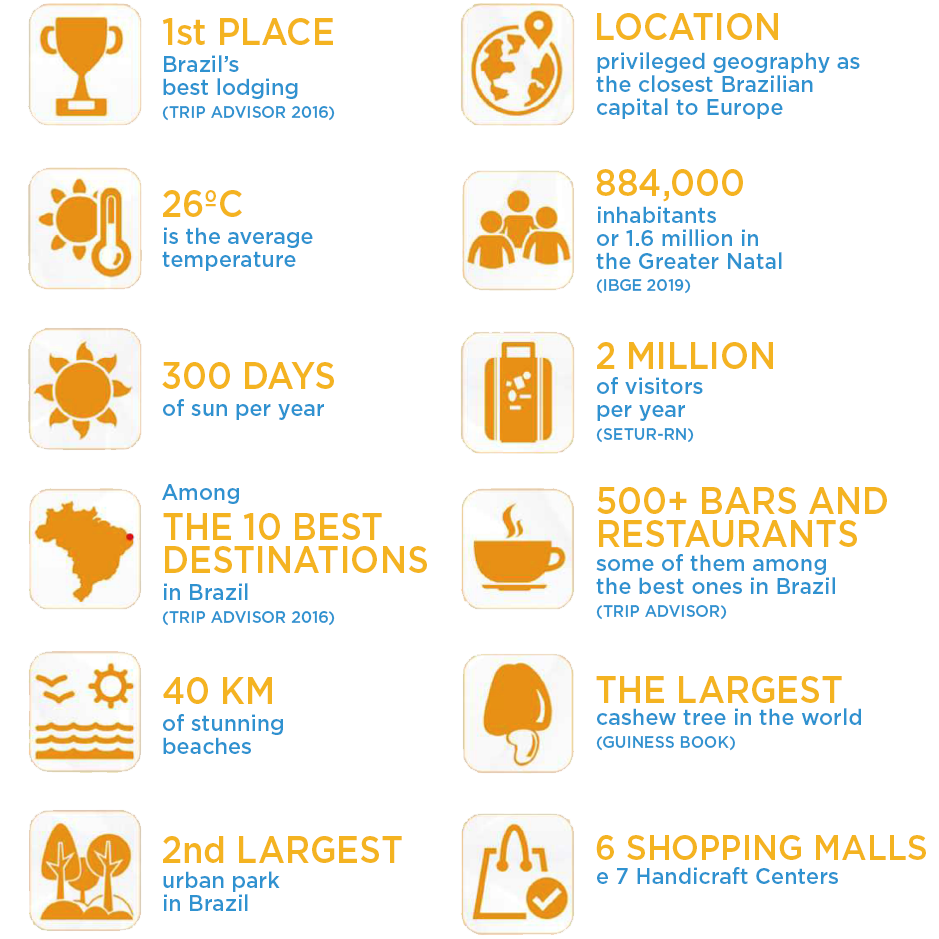
<style>
.page{position:relative;width:939px;height:939px;background:#ffffff}
.page>*{position:absolute;margin:0}
.t1{font:37.2px "Gotham-Medium";color:#f4b321;scale:0.92 1}
.t2{font:22.8px/22.8px "Gotham-Medium";color:#2f92d0;scale:0.95 1}
.t3{font:16.6px/22.8px "Gotham-Medium";color:#2f92d0;scale:0.95 1}
.t4{font:22.8px "Gotham-Medium";color:#2f92d0;scale:0.95 1}
.t5{font:37.2px/33.1px "Gotham-Medium";color:#f4b321;scale:0.92 1}
.t6{font:35.2px "Gotham-Medium";color:#f4b321;scale:0.92 1}
</style>
<div class="page">
<p class="t1" style="left:597px;top:13px;width:181px;height:27px">LOCATION</p>
<p class="t1" style="left:162px;top:18px;width:171px;height:27px">1st PLACE</p>
<p class="t2" style="left:596px;top:52px;width:264px;height:67px">privileged geography as<br>the closest Brazilian<br>capital to Europe</p>
<p class="t2" style="left:162px;top:55px;width:173px;height:66px">Brazil’s<br>best lodging<br><span class="t3">(TRIP ADVISOR 2016)</span></p>
<p class="t1" style="left:596px;top:169px;width:147px;height:33px">884,000</p>
<p class="t1" style="left:163px;top:190px;width:79px;height:27px">26ºC</p>
<p class="t2" style="left:596px;top:206px;width:186px;height:88px">inhabitants<br>or 1.6 million in<br>the Greater Natal<br><span class="t3">(IBGE 2019)</span></p>
<p class="t2" style="left:162px;top:227px;width:151px;height:44px">is the average<br>temperature</p>
<p class="t1" style="left:597px;top:342px;width:176px;height:27px">2 MILLION</p>
<p class="t1" style="left:162px;top:362px;width:172px;height:27px">300 DAYS</p>
<p class="t2" style="left:596px;top:377px;width:107px;height:66px">of visitors<br>per year<br><span class="t3">(SETUR-RN)</span></p>
<p class="t4" style="left:163px;top:399px;width:161px;height:21px">of sun per year</p>
<p class="t4" style="left:162px;top:484px;width:77px;height:20px">Among</p>
<p class="t5" style="left:597px;top:487px;width:290px;height:60px">500+ BARS AND<br>RESTAURANTS</p>
<p class="t5" style="left:163px;top:513px;width:264px;height:60px">THE 10 BEST<br>DESTINATIONS</p>
<p class="t2" style="left:596px;top:554px;width:239px;height:66px">some of them among<br>the best ones in Brazil<br><span class="t3">(TRIP ADVISOR)</span></p>
<p class="t3" style="left:162px;top:583px;width:173px;height:43px"><span class="t2">in Brazil<br></span>(TRIP ADVISOR 2016)</p>
<p class="t1" style="left:163px;top:677px;width:109px;height:27px">40 KM</p>
<p class="t1" style="left:596px;top:676px;width:246px;height:27px">THE LARGEST</p>
<p class="t2" style="left:596px;top:708px;width:265px;height:43px">cashew tree in the world<br><span class="t3">(GUINESS BOOK)</span></p>
<p class="t2" style="left:163px;top:714px;width:120px;height:40px">of stunning<br>beaches</p>
<p class="t1" style="left:163px;top:836px;width:239px;height:27px">2nd LARGEST</p>
<p class="t6" style="left:596px;top:835px;width:330px;height:25px">6 SHOPPING MALLS</p>
<p class="t4" style="left:597px;top:867px;width:241px;height:17px">e 7 Handicraft Centers</p>
<p class="t2" style="left:163px;top:871px;width:117px;height:40px">urban park<br>in Brazil</p>
</div>
